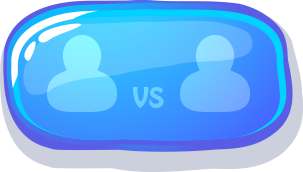
<style>
.page{position:relative;width:303px;height:172px}
.page>*{position:absolute;margin:0}
.t1{font:31.5px "HoboStd";color:#69ceff}
</style>
<div class="page">
<p class="t1" style="left:133px;top:87px;width:31px;height:21px">vs</p>
</div>
